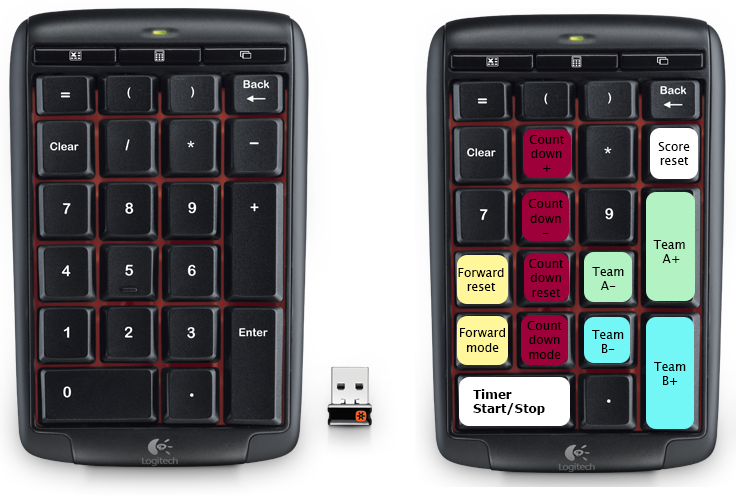
<style>
.page{position:relative;width:739px;height:497px}
.page>*{position:absolute;margin:0}
.t1{font:12px "LucidaGrande";color:#000000}
.t2{font:12px "Verdana-Bold";color:#000000}
</style>
<div class="page">
<p class="t1" style="left:529px;top:135px;width:35px;height:37px;text-align:center">Count<br>down<br>+</p>
<p class="t1" style="left:658px;top:142px;width:32px;height:23px;text-align:center">Score<br>reset</p>
<p class="t1" style="left:528px;top:199px;width:35px;height:35px;text-align:center">Count<br>down<br>-</p>
<p class="t1" style="left:653px;top:240px;width:32px;height:23px;text-align:center">Team <br>A+</p>
<p class="t1" style="left:458px;top:268px;width:46px;height:23px;text-align:center">Forward<br>reset</p>
<p class="t1" style="left:529px;top:259px;width:35px;height:38px;text-align:center">Count<br>down<br>reset</p>
<p class="t1" style="left:592px;top:267px;width:32px;height:23px;text-align:center">Team<br>A-</p>
<p class="t1" style="left:460px;top:328px;width:45px;height:24px;text-align:center">Forward<br>mode</p>
<p class="t1" style="left:527px;top:321px;width:35px;height:38px;text-align:center">Count<br>down<br>mode</p>
<p class="t1" style="left:592px;top:330px;width:32px;height:23px;text-align:center">Team<br>B-</p>
<p class="t1" style="left:654px;top:362px;width:32px;height:23px;text-align:center">Team<br>B+</p>
<p class="t2" style="left:473px;top:389px;width:72px;height:26px">Timer<br>Start/Stop</p>
</div>
